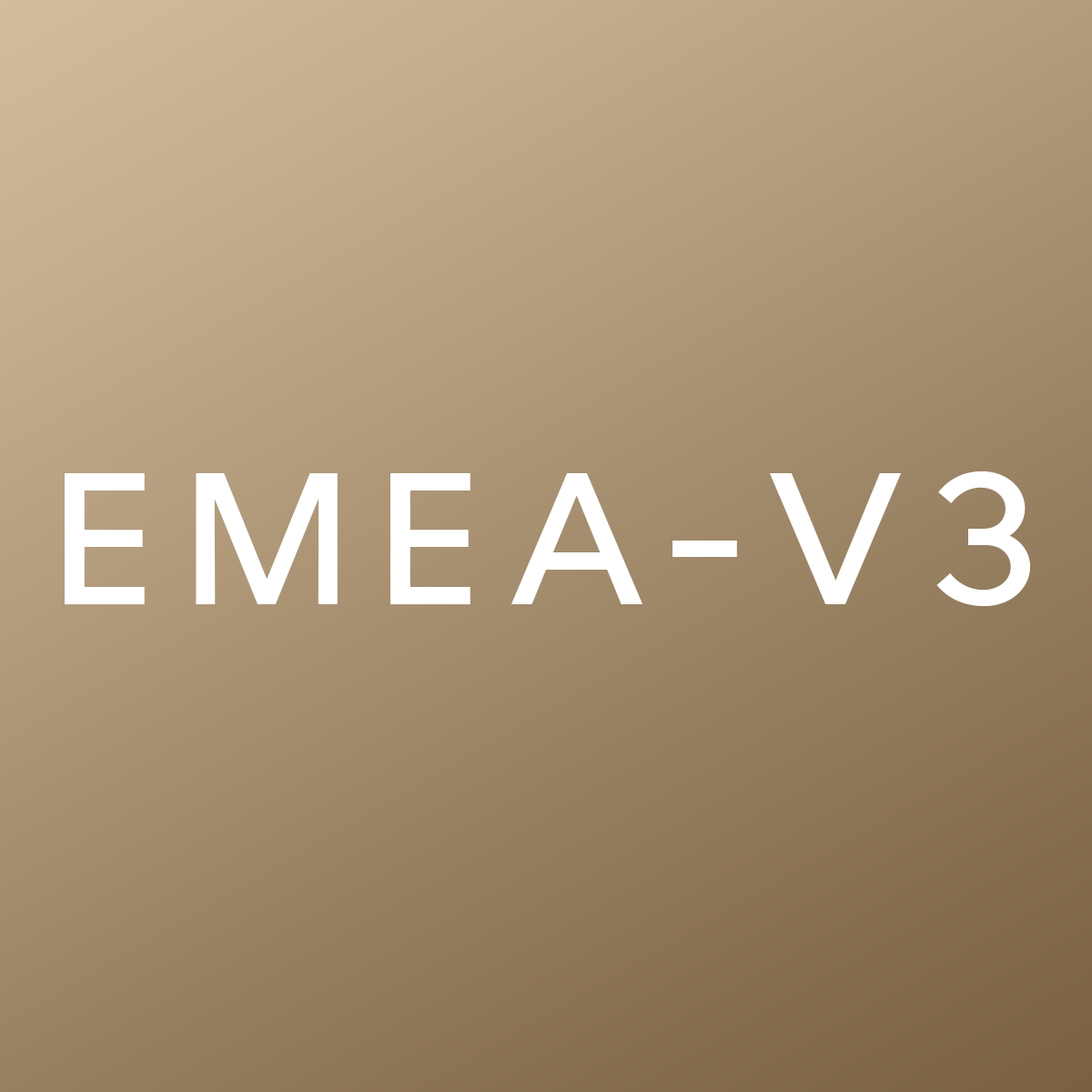
<style>
.page{position:relative;width:1092px;height:1092px}
.page>*{position:absolute;margin:0}
.t1{font:187.5px "UberMove-Medium";letter-spacing:0.18em;color:#ffffff}
</style>
<div class="page">
<p class="t1" style="left:65px;top:471px;width:965px;height:136px">EMEA-V3</p>
</div>
